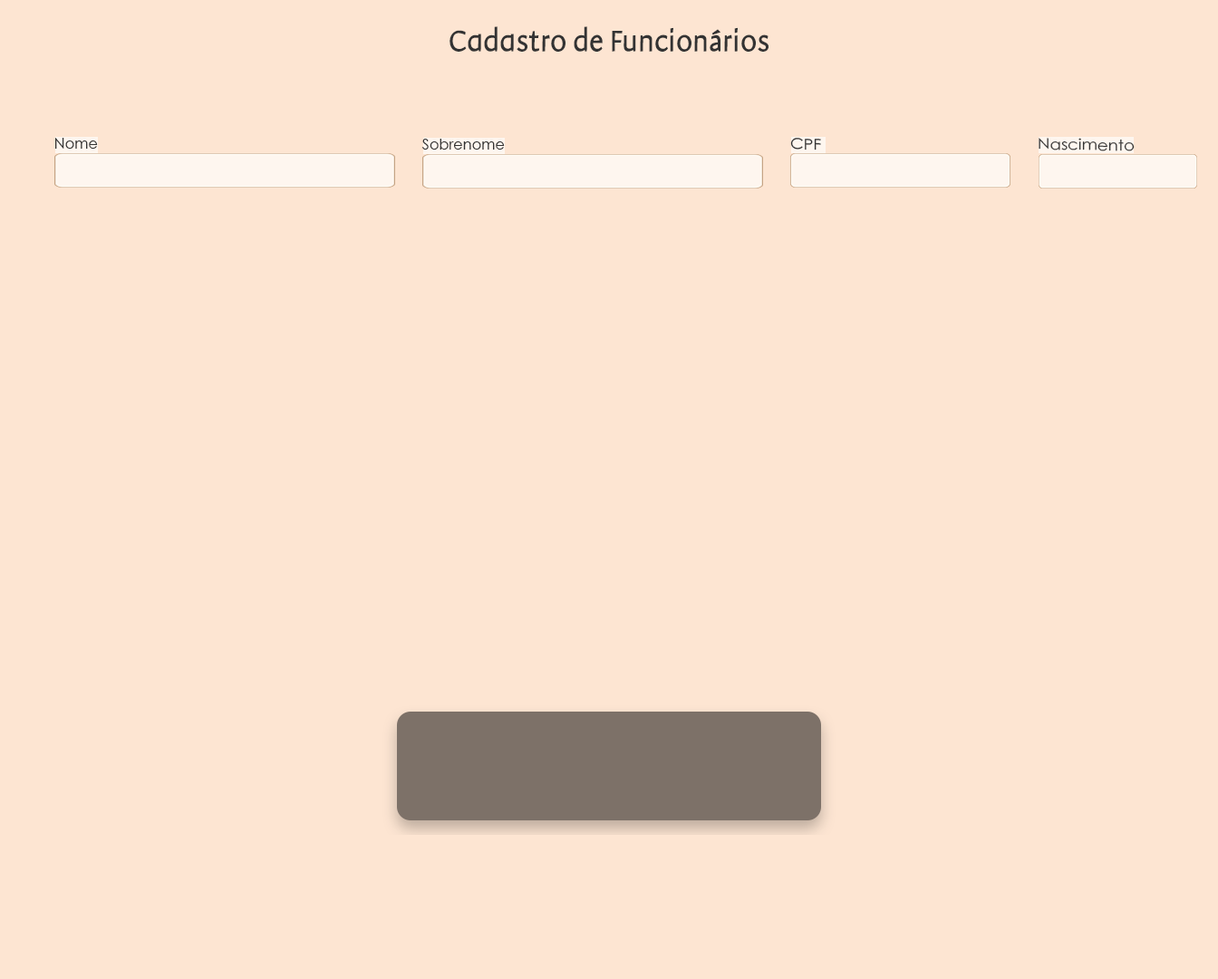
<style>
.page{position:relative;width:1218px;height:979px;background:#fde5d2}
.page>*{position:absolute;margin:0}
.t1{font:31.7px "Amira-Light";color:#333333}
.t2{font:15px "AvantGardeBook";color:#333333}
.t3{font:15px "AvantGardeBook";color:#333333;scale:1.1 1}
</style>
<div class="page">
<p class="t1" style="left:450px;top:26px;width:319px;height:26px">Cadastro de Funcionários</p>
<p class="t2" style="left:55px;top:138px;width:43px;height:11px">Nome</p>
<p class="t3" style="left:790px;top:138px;width:31px;height:12px;rotate:1deg">CPF</p>
<p class="t3" style="left:1039px;top:138px;width:96px;height:13px;rotate:1deg">Nascimento</p>
<p class="t2" style="left:421px;top:139px;width:84px;height:11px">Sobrenome</p>
</div>
